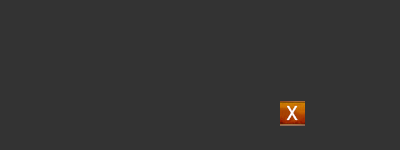
<style>
.page{position:relative;width:400px;height:150px;background:#333333}
.page>*{position:absolute;margin:0}
.t1{font:19.9px "Bahnschrift";color:#ffffff}
</style>
<div class="page">
<p class="t1" style="left:286px;top:105px;width:12px;height:16px">X</p>
</div>
